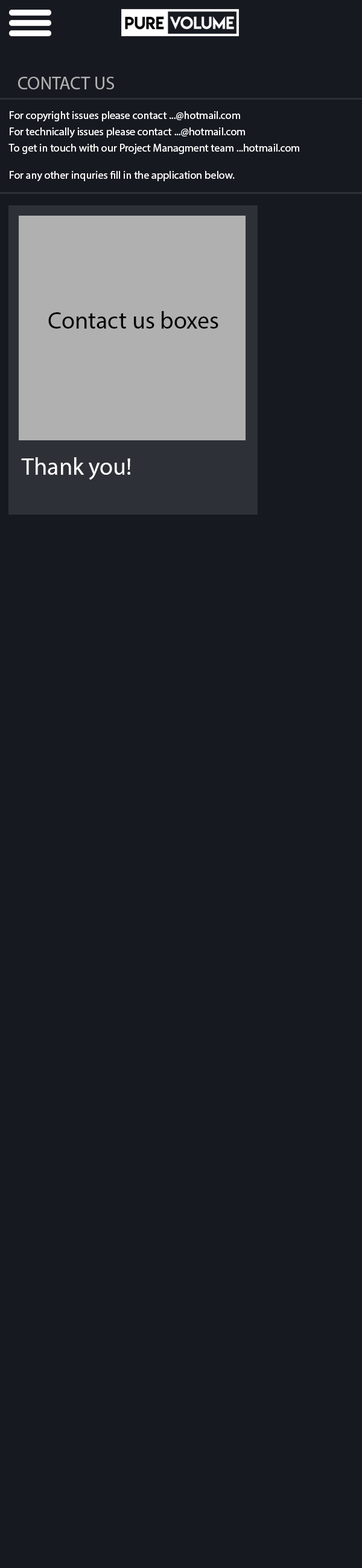
<style>
.page{position:relative;width:362px;height:1568px;background:#171921}
.page>*{position:absolute;margin:0}
.t1{font:18.1px "MyriadPro-Regular";color:#b0b0b0}
.t2{font:10.9px/5.4px "MyriadPro-Regular";color:#ffffff}
.t3{font:24.2px "MyriadPro-Regular";color:#000000}
.t4{font:24.2px "MyriadPro-Regular";color:#ffffff}
</style>
<div class="page">
<p class="t1" style="left:18px;top:77px;width:96px;height:12px">CONTACT US</p>
<p class="t2" style="left:8px;top:111px;width:292px;height:70px">For copyright issues please contact ...@hotmail.com<br><br><br>For technically issues please contact ...@hotmail.com<br><br><br>To get in touch with our Project Managment team ...hotmail.com<br><br><br><br><br>For any other inquries fill in the application below.</p>
<p class="t3" style="left:48px;top:311px;width:171px;height:18px">Contact us boxes</p>
<p class="t4" style="left:21px;top:457px;width:109px;height:23px">Thank you!</p>
</div>
